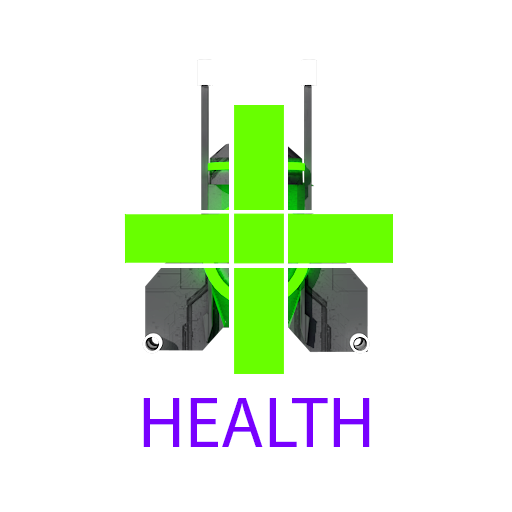
<style>
.page{position:relative;width:512px;height:512px;background:#ffffff}
.page>*{position:absolute;margin:0}
.t1{font:72px "MyriadPro-Regular";color:#7800ff}
</style>
<div class="page">
<p class="t1" style="left:143px;top:398px;width:227px;height:49px">HEALTH</p>
</div>
